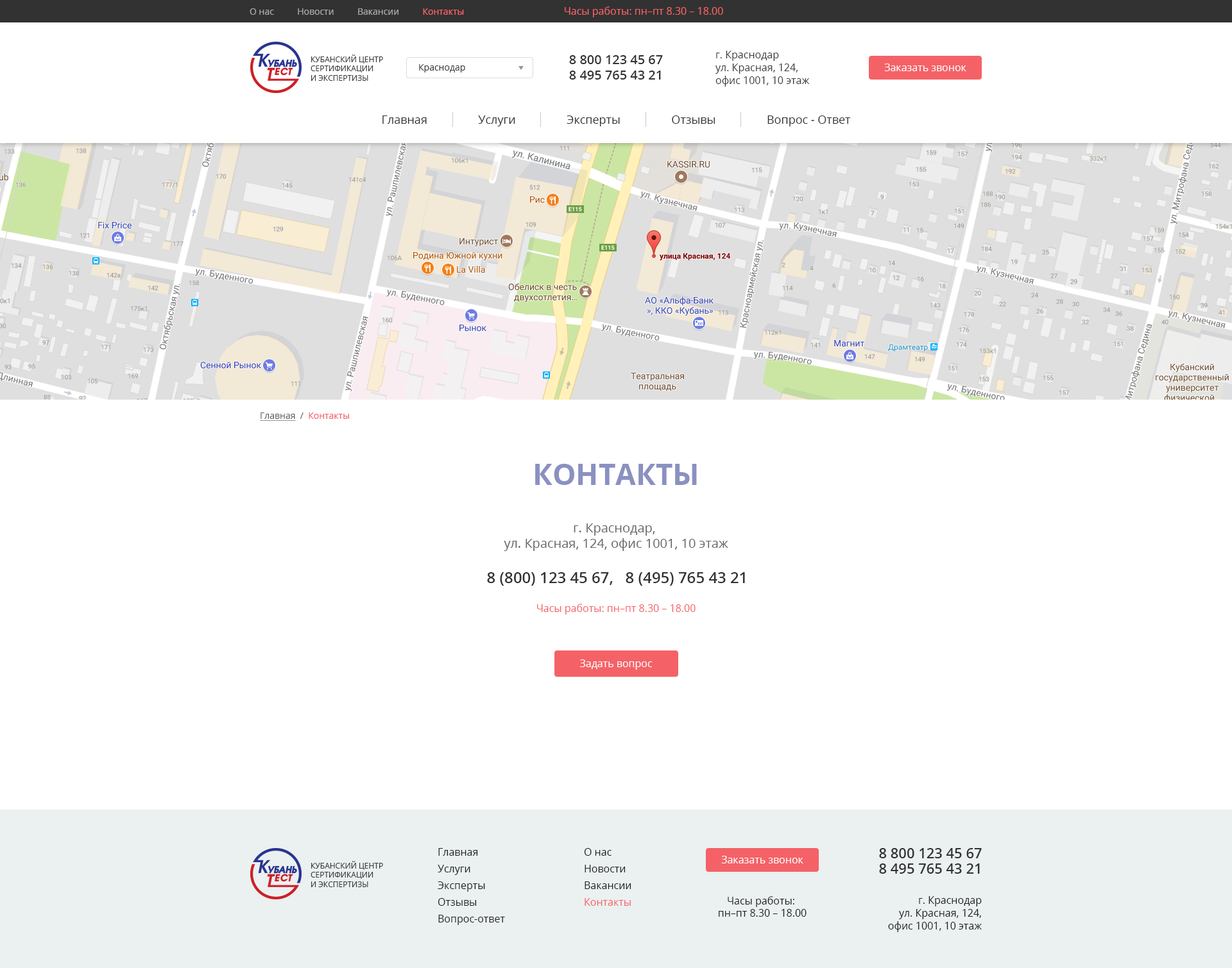
<style>
.page{position:relative;width:1232px;height:968px;background:#ffffff}
.page>*{position:absolute;margin:0}
.t1{font:9px "OpenSans";color:#aaaaaa}
.t2{font:9px "OpenSans";color:#f46267}
.t3{font:10.3px "OpenSans";color:#f46267}
.t4{font:10.3px/12.8px "OpenSans";color:#3c3c3c}
.t5{font:7.7px "OpenSans";color:#3c3c3c;text-transform:uppercase}
.t6{font:9px "OpenSans";color:#3c3c3c}
.t7{font:12.8px "OpenSans-Semibold";color:#323232}
.t8{font:10.3px "OpenSans";color:#ffffff}
.t9{font:11.5px "OpenSans";color:#323232}
.t10{font:9px "OpenSans";color:#646464;text-decoration:underline}
.t11{font:9px "OpenSans";color:#646464}
.t12{font:29.5px "OpenSans-Bold";color:#8a91c1;text-transform:uppercase}
.t13{font:12.8px "OpenSans";color:#646464}
.t14{font:15.4px "OpenSans-Semibold";color:#323232}
.t15{font:10.3px/16.7px "OpenSans";color:#1e1e1e}
.t16{font:10.3px/16.7px "OpenSans";color:#f46267}
.t17{font:14.1px "OpenSans-Semibold";color:#323232}
.t18{font:10.3px "OpenSans";color:#1e1e1e}
.t19{font:10.3px/12.8px "OpenSans";color:#1e1e1e}
</style>
<div class="page">
<p class="t1" style="left:250px;top:8px;width:214px;height:7px">О нас          Новости          Вакансии          <span class="t2">Контакты</span></p>
<p class="t3" style="left:565px;top:6px;width:158px;height:11px">Часы работы: пн–пт 8.30 – 18.00</p>
<p class="t4" style="left:715px;top:51px;width:95px;height:36px">г. Краснодар<br>ул. Красная, 124, <br>офис 1001, 10 этаж</p>
<p class="t5" style="left:311px;top:55px;width:72px;height:26px">Кубанский центр<br>сертификации<br>и экспертизы</p>
<p class="t6" style="left:419px;top:64px;width:46px;height:8px">Краснодар</p>
<p class="t7" style="left:569px;top:55px;width:94px;height:9px">8 800 123 45 67</p>
<p class="t8" style="left:884px;top:64px;width:82px;height:7px">Заказать звонок</p>
<p class="t7" style="left:569px;top:71px;width:92px;height:9px">8 495 765 43 21</p>
<p class="t9" style="left:382px;top:115px;width:469px;height:11px">Главная                 Услуги                 Эксперты                 Отзывы                 Вопрос - Ответ</p>
<p class="t2" style="left:260px;top:413px;width:89px;height:8px"><span class="t10">Главная</span><span class="t11">  /  </span>Контакты</p>
<p class="t12" style="left:535px;top:464px;width:162px;height:21px">Контакты</p>
<p class="t13" style="left:504px;top:523px;width:224px;height:28px;text-align:center">г. Краснодар, <br>ул. Красная, 124, офис 1001, 10 этаж</p>
<p class="t14" style="left:487px;top:572px;width:258px;height:14px">8 (800) 123 45 67,   8 (495) 765 43 21</p>
<p class="t3" style="left:537px;top:604px;width:158px;height:11px">Часы работы: пн–пт 8.30 – 18.00</p>
<p class="t8" style="left:580px;top:660px;width:72px;height:10px">Задать вопрос</p>
<p class="t15" style="left:438px;top:848px;width:67px;height:77px">Главная<br>Услуги<br>Эксперты<br>Отзывы<br>Вопрос-ответ</p>
<p class="t15" style="left:584px;top:848px;width:47px;height:58px">О нас<br>Новости<br>Вакансии<br><span class="t16">Контакты</span></p>
<p class="t8" style="left:721px;top:856px;width:82px;height:8px">Заказать звонок</p>
<p class="t17" style="left:879px;top:848px;width:103px;height:10px">8 800 123 45 67</p>
<p class="t5" style="left:311px;top:861px;width:72px;height:26px">Кубанский центр<br>сертификации<br>и экспертизы</p>
<p class="t17" style="left:879px;top:864px;width:101px;height:10px">8 495 765 43 21</p>
<p class="t18" style="left:719px;top:896px;width:87px;height:21px;text-align:center">Часы работы: <br>пн–пт 8.30 – 18.00</p>
<p class="t19" style="left:888px;top:896px;width:94px;height:36px;text-align:right">г. Краснодар<br>ул. Красная, 124,<br>офис 1001, 10 этаж</p>
</div>
